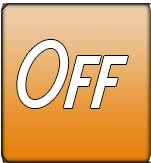
<style>
.page{position:relative;width:151px;height:163px}
.page>*{position:absolute;margin:0}
.t1{font:100px "AeroviasBrasilNF";color:#ffffff}
</style>
<div class="page">
<p class="t1" style="left:17px;top:40px;width:111px;height:68px">Off</p>
</div>
